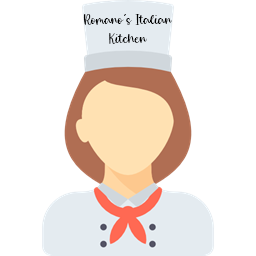
<style>
.page{position:relative;width:256px;height:256px;background:#ffffff}
.page>*{position:absolute;margin:0}
.t1{font:16px "RainbowUniverse";color:#000000}
</style>
<div class="page">
<p class="t1" style="left:83px;top:14px;width:89px;height:30px;text-align:center">Romano’s Italian Kitchen</p>
</div>
